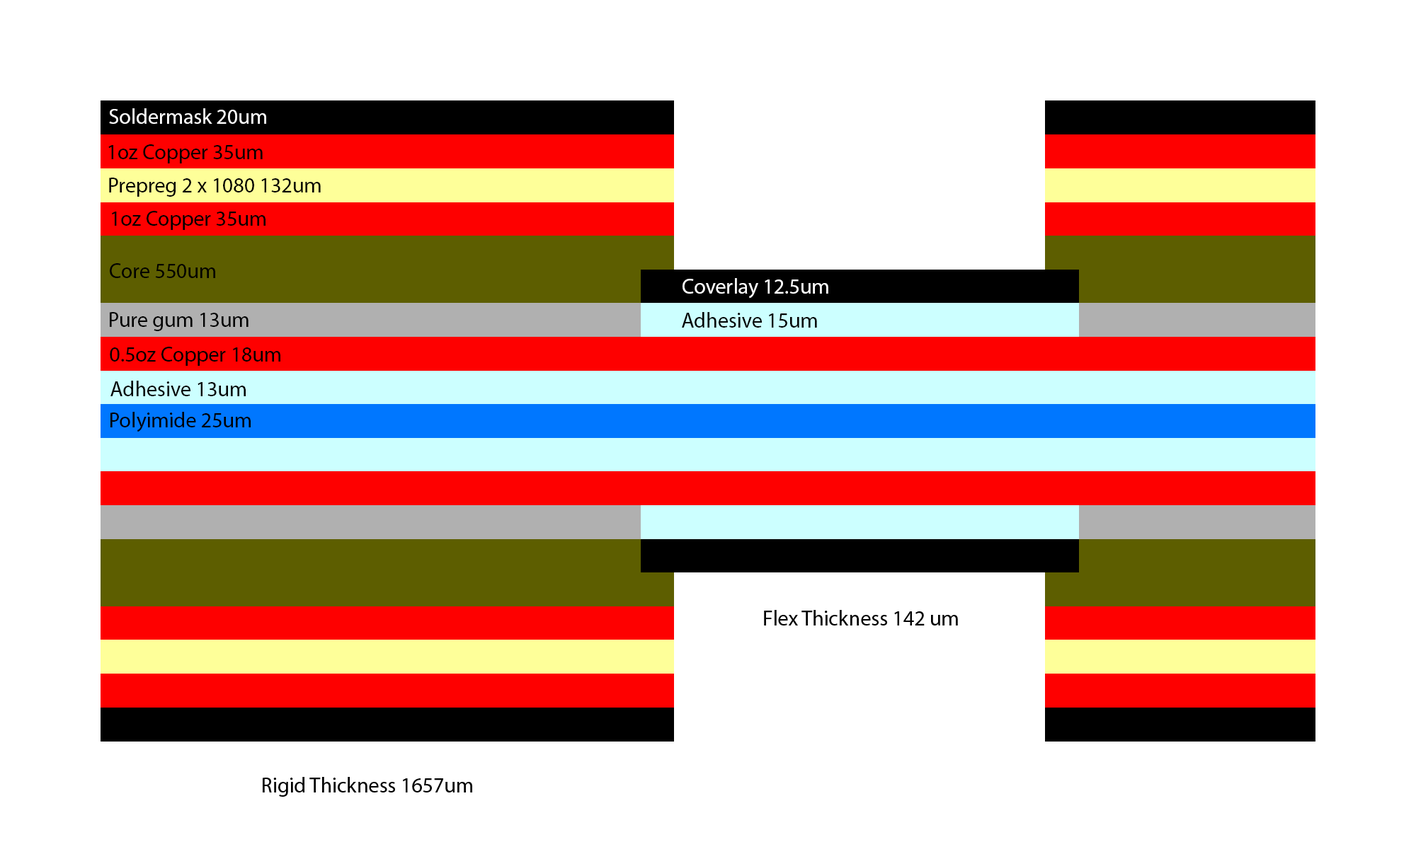
<style>
.page{position:relative;width:1416px;height:842px;background:#ffffff}
.page>*{position:absolute;margin:0}
.t1{font:21.2px "MyriadPro-Regular";color:#ffffff}
.t2{font:21.2px "MyriadPro-Regular";color:#000000}
</style>
<div class="page">
<p class="t1" style="left:109px;top:108px;width:157px;height:16px">Soldermask 20um</p>
<p class="t2" style="left:108px;top:144px;width:155px;height:20px">1oz Copper 35um</p>
<p class="t2" style="left:109px;top:178px;width:212px;height:19px">Prepreg 2 x 1080 132um</p>
<p class="t2" style="left:112px;top:211px;width:153px;height:19px">1oz Copper 35um</p>
<p class="t2" style="left:110px;top:263px;width:105px;height:15px">Core 550um</p>
<p class="t1" style="left:682px;top:278px;width:146px;height:21px">Coverlay 12.5um</p>
<p class="t2" style="left:110px;top:312px;width:138px;height:19px">Pure gum 13um</p>
<p class="t2" style="left:682px;top:312px;width:135px;height:16px">Adhesive 15um</p>
<p class="t2" style="left:110px;top:347px;width:170px;height:19px">0.5oz Copper 18um</p>
<p class="t2" style="left:110px;top:381px;width:136px;height:15px">Adhesive 13um</p>
<p class="t2" style="left:110px;top:412px;width:141px;height:20px">Polyimide 25um</p>
<p class="t2" style="left:764px;top:610px;width:194px;height:16px">Flex Thickness 142 um</p>
<p class="t2" style="left:263px;top:777px;width:209px;height:20px">Rigid Thickness 1657um</p>
</div>
